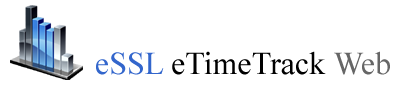
<style>
.page{position:relative;width:405px;height:85px;background:#ffffff}
.page>*{position:absolute;margin:0}
.t1{font:32px "TimesNewRomanPSMT";color:#000000}
.t2{font:32px "TimesNewRomanPSMT";color:#3366cc}
.t3{font:32px "TimesNewRomanPSMT";color:#666666}
</style>
<div class="page">
<p class="t1" style="left:96px;top:51px;width:294px;height:24px"><span class="t2">eSSL</span> eTimeTrack <span class="t3">Web</span></p>
</div>
